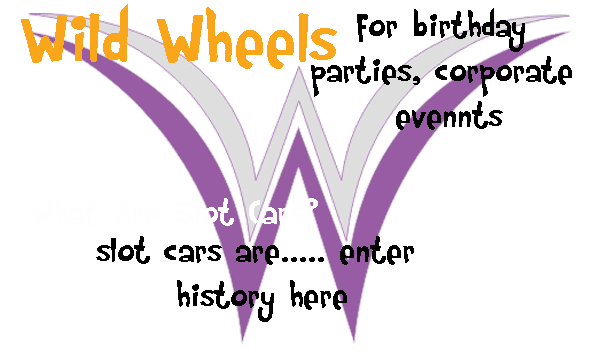
<style>
.page{position:relative;width:591px;height:354px;background:#ffffff}
.page>*{position:absolute;margin:0}
.t1{font:75px "Rumpelstiltskin";color:#faa61a}
.t2{font:37.5px "Rumpelstiltskin";color:#000000}
.t3{font:37.5px "Rumpelstiltskin";color:#010101}
</style>
<div class="page">
<p class="t1" style="left:21px;top:4px;width:316px;height:65px">Wild Wheels</p>
<p class="t2" style="left:311px;top:8px;width:261px;height:122px;text-align:center">for birthday <br>parties, corporate <br>evennts</p>
<p class="t3" style="left:96px;top:236px;width:318px;height:86px;text-align:center">slot cars are..... enter <br>history here</p>
</div>
